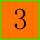
<style>
.page{position:relative;width:40px;height:40px;background:#ff7200}
.page>*{position:absolute;margin:0}
.t1{font:30px "SimSun";color:#000000}
</style>
<div class="page">
<p class="t1" style="left:14px;top:8px;width:12px;height:22px">3</p>
</div>
